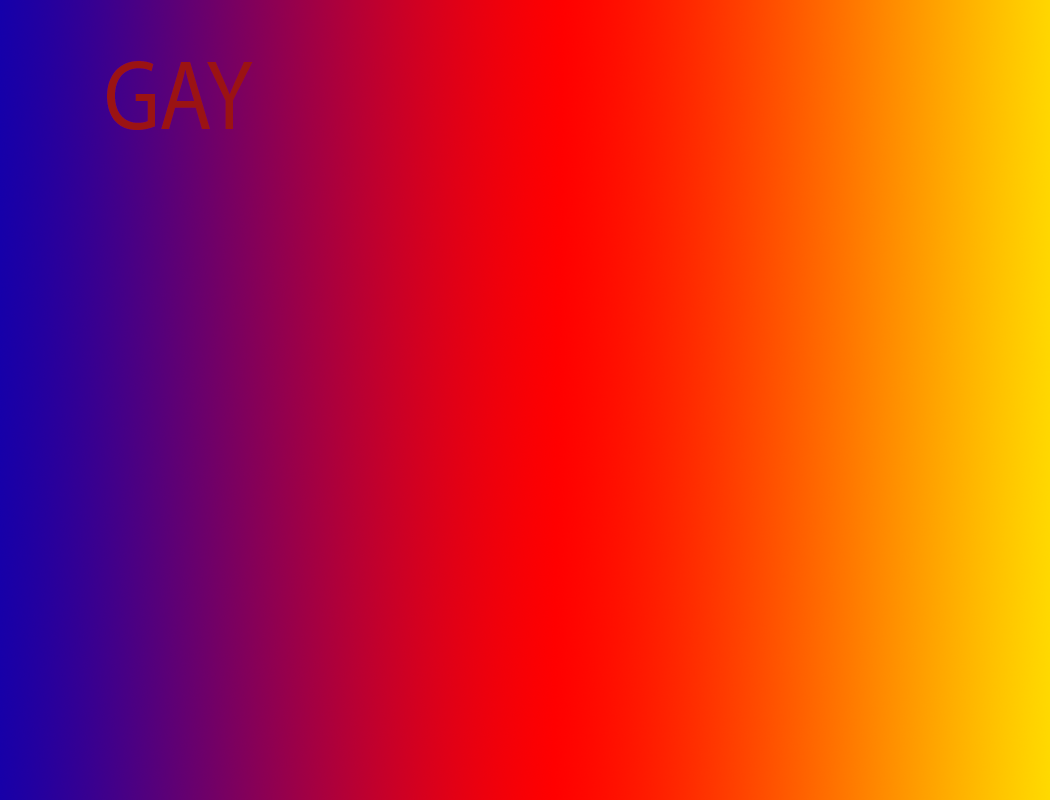
<style>
.page{position:relative;width:1050px;height:800px}
.page>*{position:absolute;margin:0}
.t1{font:100px "MyriadPro-Regular";color:#9b1313;scale:0.86 1}
</style>
<div class="page">
<p class="t1" style="left:107px;top:61px;width:146px;height:69px">GAY</p>
</div>
